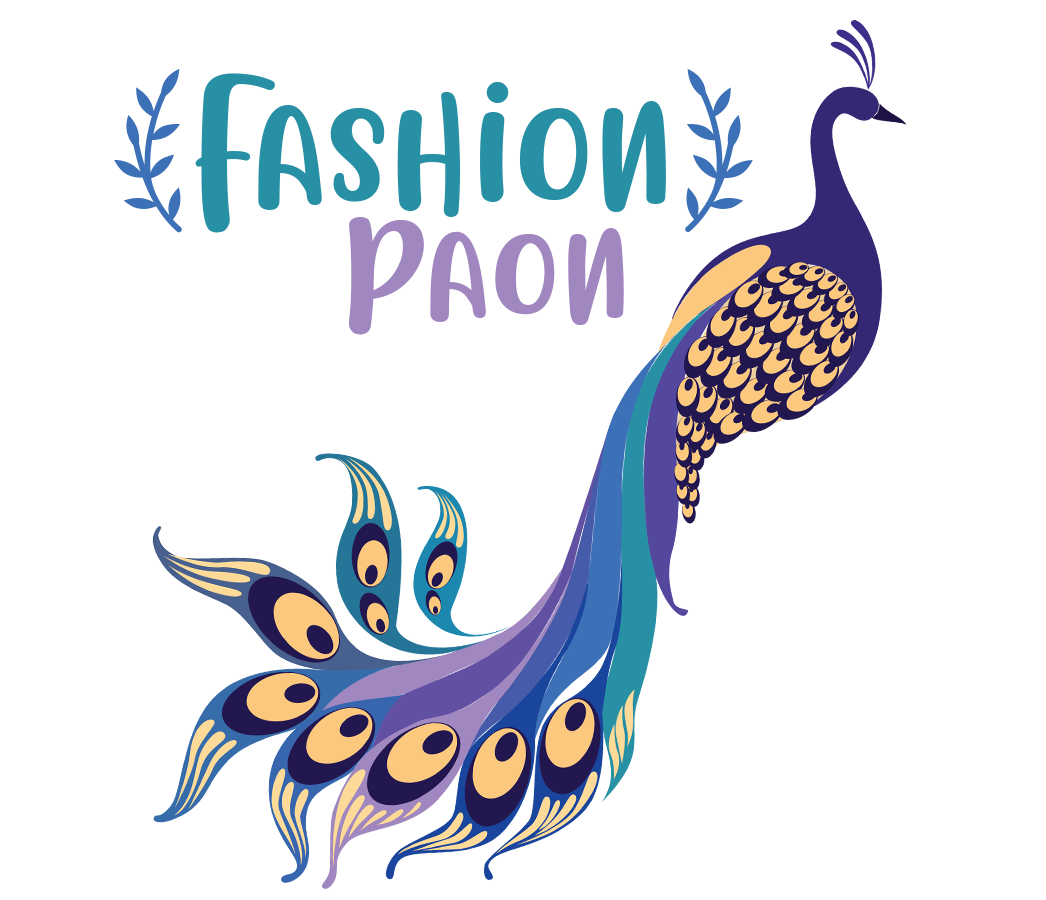
<style>
.page{position:relative;width:1046px;height:900px;background:#ffffff}
.page>*{position:absolute;margin:0}
.t1{font:166.7px "FLOTTA";color:#2890a4}
.t2{font:166.7px "FLOTTA";color:#3c70b7}
.t3{font:145.8px "FLOTTA";color:#a087bf}
</style>
<div class="page">
<p class="t1" style="left:114px;top:68px;width:639px;height:165px"><span class="t2">{</span>Fashion<span class="t2">}</span></p>
<p class="t3" style="left:349px;top:217px;width:275px;height:118px">Paon</p>
</div>
